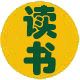
<style>
.page{position:relative;width:80px;height:80px;background:#ffffff}
.page>*{position:absolute;margin:0}
.t1{font:36px/36px "STHupo";color:#095530}
</style>
<div class="page">
<p class="t1" style="left:23px;top:5px;width:34px;height:71px">读<br>书</p>
</div>
